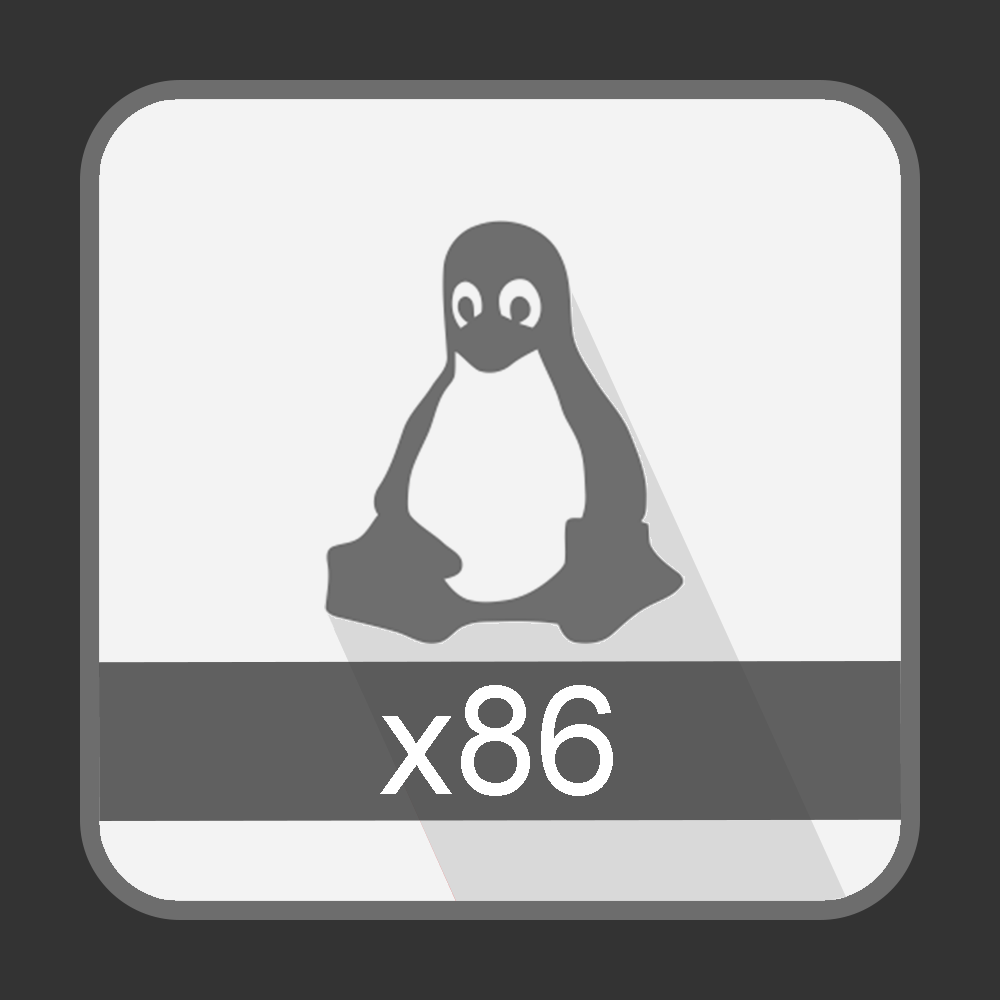
<style>
.page{position:relative;width:1000px;height:1000px;background:#f3f3f3}
.page>*{position:absolute;margin:0}
.t1{font:150px "ArialMT";color:#ffffff}
</style>
<div class="page">
<p class="t1" style="left:380px;top:685px;width:233px;height:111px">x86</p>
</div>
